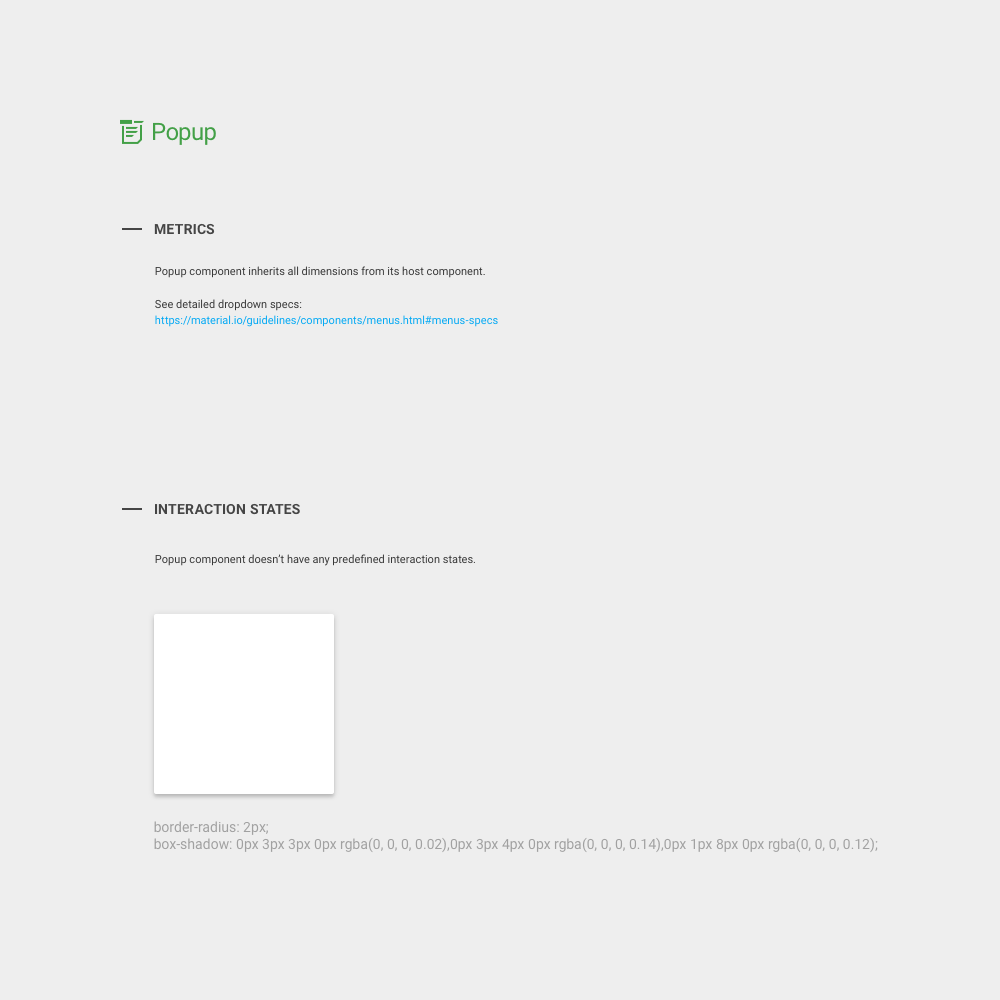
<style>
.page{position:relative;width:1000px;height:1000px;background:#eeeeee}
.page>*{position:absolute;margin:0}
.t1{font:24px "Roboto-Regular";letter-spacing:-0.025em;color:#43a047}
.t2{font:14px "Roboto-Bold";letter-spacing:0.01em;color:#454545;text-transform:uppercase}
.t3{font:11px/16px "Roboto-Regular";color:#383838}
.t4{font:11px/16px "Roboto-Regular";color:#03a9f4}
.t5{font:11px "Roboto-Regular";color:#383838}
.t6{font:14px "Roboto-Regular";color:#a1a1a1}
</style>
<div class="page">
<p class="t1" style="left:153px;top:122px;width:63px;height:23px">Popup</p>
<p class="t2" style="left:154px;top:223px;width:61px;height:12px">Metrics</p>
<p class="t3" style="left:155px;top:266px;width:343px;height:61px">Popup component inherits all dimensions from its host component.<br><br>See detailed dropdown specs:<br><span class="t4">https://material.io/guidelines/components/menus.html#menus-specs</span></p>
<p class="t2" style="left:155px;top:503px;width:145px;height:12px">Interaction states</p>
<p class="t5" style="left:155px;top:554px;width:320px;height:12px">Popup component doesn’t have any predefined interaction states.</p>
<p class="t6" style="left:154px;top:821px;width:724px;height:32px">border-radius: 2px;<br>box-shadow: 0px 3px 3px 0px rgba(0, 0, 0, 0.02),0px 3px 4px 0px rgba(0, 0, 0, 0.14),0px 1px 8px 0px rgba(0, 0, 0, 0.12);</p>
</div>
